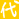
<style>
.page{position:relative;width:19px;height:19px;background:#ffce00}
.page>*{position:absolute;margin:0}
.t1{font:20.1px "AaJoanna";color:#ffffff}
</style>
<div class="page">
<p class="t1" style="left:0px;top:0px;width:20px;height:18px">代</p>
</div>
